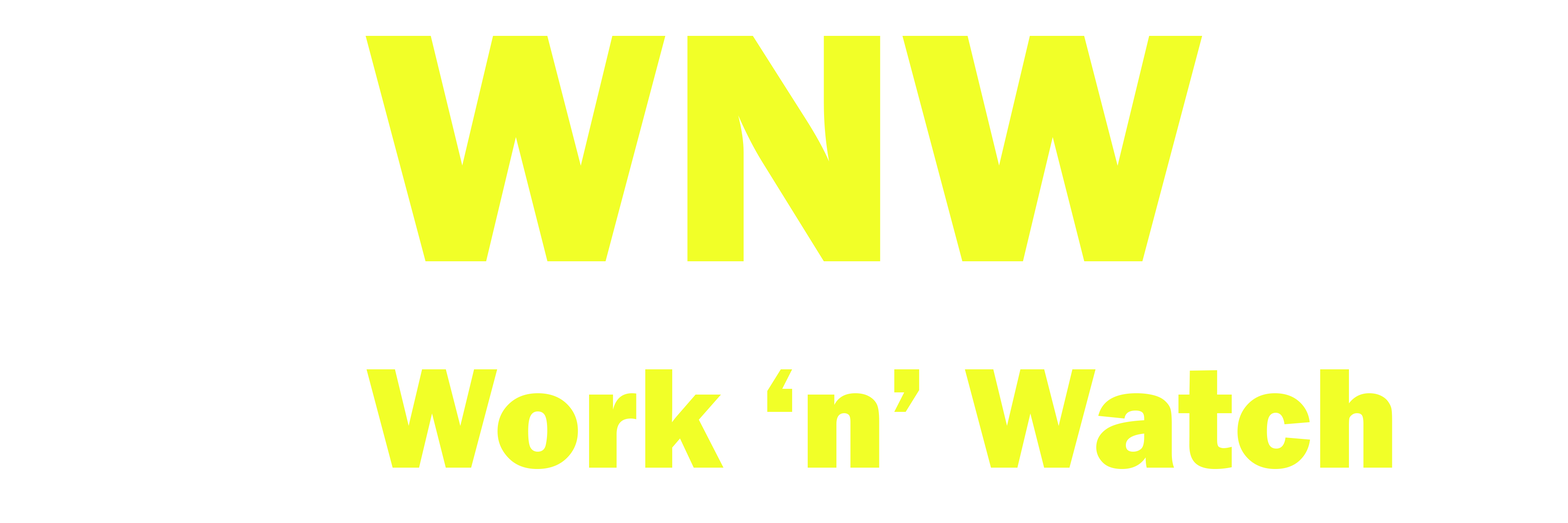
<style>
.page{position:relative;width:1568px;height:523px;background:#ffffff}
.page>*{position:absolute;margin:0}
.t1{font:338.3px "FranklinGothic-Heavy";color:#f1ff28}
.t2{font:147.5px "FranklinGothic-Heavy";color:#f1ff28}
</style>
<div class="page">
<p class="t1" style="left:366px;top:36px;width:836px;height:225px">WNW</p>
<p class="t2" style="left:366px;top:369px;width:1026px;height:100px">Work ‘n’ Watch</p>
</div>
